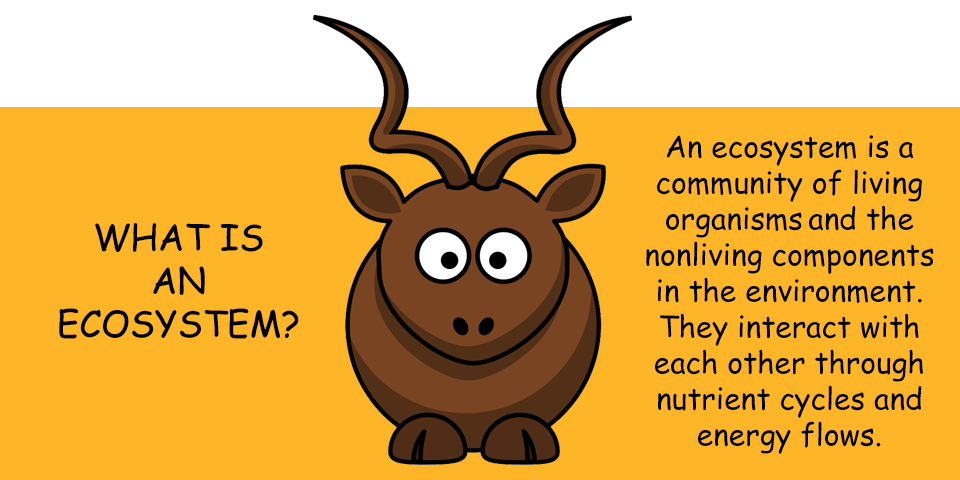
<style>
.page{position:relative;width:960px;height:480px;background:#feb628}
.page>*{position:absolute;margin:0}
.t1{font:30px "ComicSansMS";color:#000000}
.t2{font:36px "ComicSansMS";color:#000000}
</style>
<div class="page">
<p class="t1" style="left:646px;top:135px;width:288px;height:319px;text-align:center">An ecosystem is a<br>community of living<br>organisms and the<br>nonliving components<br>in the environment.<br>They interact with<br>each other through<br>nutrient cycles and<br>energy flows.</p>
<p class="t2" style="left:59px;top:223px;width:240px;height:116px;text-align:center">WHAT IS<br>AN<br>ECOSYSTEM?</p>
</div>
